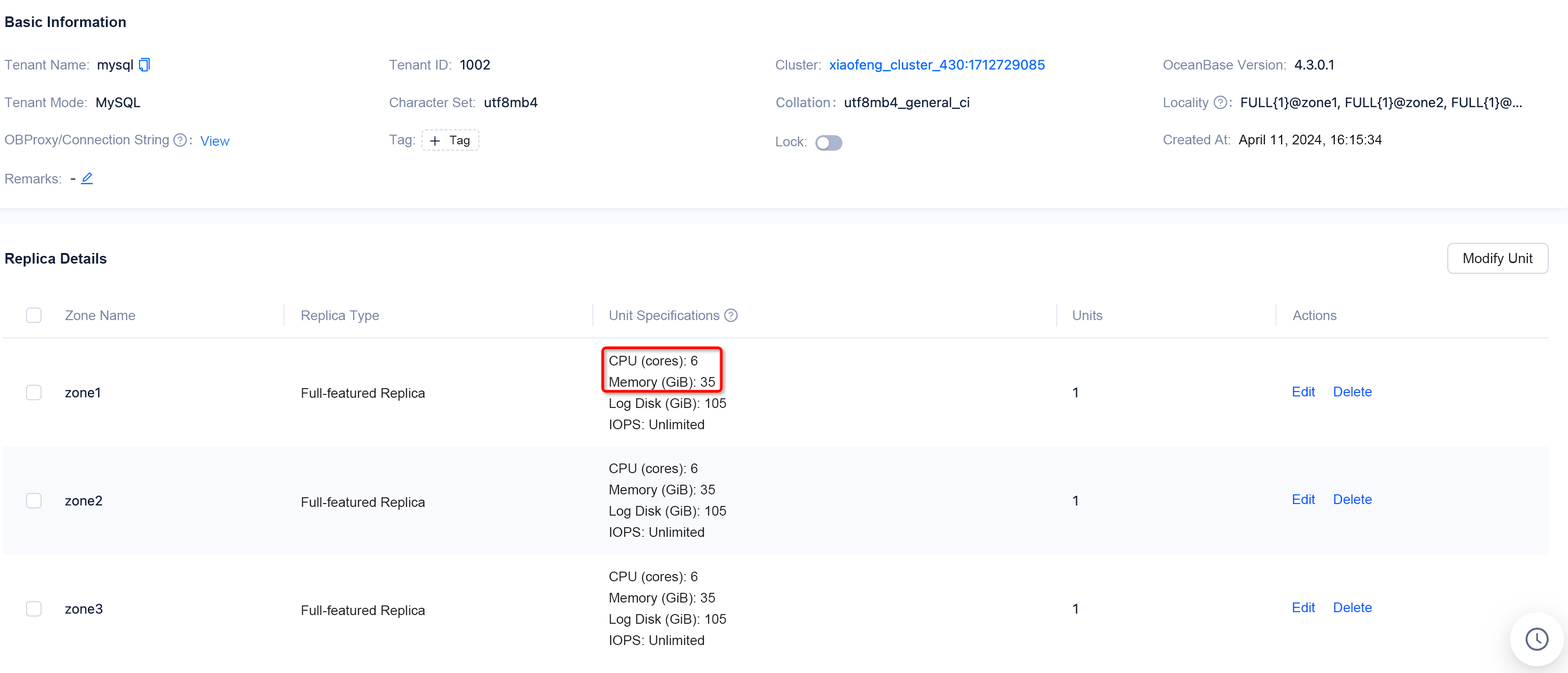
<style>
.page{position:relative;width:1568px;height:673px;background:#ffffff}
.page>*{position:absolute;margin:0}
.t1{font:14.5px "Arial-BoldMT";color:#132039}
.t2{font:13.5px "ArialMT";color:#7885a0}
.t3{font:13.5px "ArialMT";color:#2376f9}
.t4{font:12.1px "ArialMT";color:#202020}
.t5{font:13.5px "ArialMT";color:#0d0d0d}
.t6{font:14px "ArialMT";color:#1e1e1e}
.t7{font:13.5px/21.2px "ArialMT";color:#202020}
.t8{font:13.5px "ArialMT";color:#202020}
.t9{font:13.5px "ArialMT";color:#0052ff}
</style>
<div class="page">
<p class="t1" style="left:5px;top:16px;width:121px;height:11px">Basic Information</p>
<p class="t2" style="left:4px;top:60px;width:85px;height:10px">Tenant Name:</p>
<p class="t2" style="left:389px;top:60px;width:62px;height:10px">Tenant ID:</p>
<p class="t2" style="left:776px;top:60px;width:45px;height:10px">Cluster:</p>
<p class="t2" style="left:1163px;top:60px;width:123px;height:10px">OceanBase Version:</p>
<p class="t2" style="left:4px;top:98px;width:83px;height:9px">Tenant Mode:</p>
<p class="t2" style="left:390px;top:98px;width:85px;height:9px">Character Set:</p>
<p class="t2" style="left:1164px;top:98px;width:45px;height:12px">Locality</p>
<p class="t2" style="left:5px;top:135px;width:164px;height:12px">OBProxy/Connection String</p>
<p class="t3" style="left:200px;top:136px;width:30px;height:10px">View</p>
<p class="t2" style="left:389px;top:135px;width:26px;height:12px">Tag:</p>
<p class="t4" style="left:449px;top:136px;width:21px;height:11px">Tag</p>
<p class="t2" style="left:776px;top:137px;width:31px;height:9px">Lock:</p>
<p class="t5" style="left:1163px;top:135px;width:219px;height:12px"><span class="t2">Created At:  </span>April 11, 2024, 16:15:34</p>
<p class="t2" style="left:5px;top:174px;width:56px;height:9px">Remarks:</p>
<p class="t1" style="left:5px;top:253px;width:102px;height:13px">Replica Details</p>
<p class="t6" style="left:1464px;top:253px;width:69px;height:13px">Modify Unit</p>
<p class="t2" style="left:65px;top:310px;width:70px;height:10px">Zone Name</p>
<p class="t2" style="left:302px;top:310px;width:77px;height:13px">Replica Type</p>
<p class="t2" style="left:610px;top:310px;width:109px;height:13px">Unit Specifications</p>
<p class="t2" style="left:1073px;top:310px;width:30px;height:10px">Units</p>
<p class="t2" style="left:1293px;top:310px;width:44px;height:10px">Actions</p>
<p class="t7" style="left:609px;top:356px;width:117px;height:73px">CPU (cores): 6<br>Memory (GiB): 35<br>Log Disk (GiB): 105<br>IOPS: Unlimited</p>
<p class="t8" style="left:302px;top:388px;width:123px;height:13px">Full-featured Replica</p>
<p class="t9" style="left:1293px;top:387px;width:22px;height:9px">Edit</p>
<p class="t9" style="left:1334px;top:387px;width:38px;height:9px">Delete</p>
<p class="t7" style="left:609px;top:463px;width:117px;height:74px">CPU (cores): 6<br>Memory (GiB): 35<br>Log Disk (GiB): 105<br>IOPS: Unlimited</p>
<p class="t8" style="left:302px;top:497px;width:123px;height:13px">Full-featured Replica</p>
<p class="t9" style="left:1293px;top:494px;width:22px;height:10px">Edit</p>
<p class="t9" style="left:1334px;top:494px;width:38px;height:10px">Delete</p>
<p class="t7" style="left:609px;top:572px;width:117px;height:73px">CPU (cores): 6<br>Memory (GiB): 35<br>Log Disk (GiB): 105<br>IOPS: Unlimited</p>
<p class="t8" style="left:302px;top:605px;width:123px;height:13px">Full-featured Replica</p>
<p class="t9" style="left:1293px;top:602px;width:22px;height:10px">Edit</p>
<p class="t9" style="left:1334px;top:602px;width:38px;height:10px">Delete</p>
</div>
